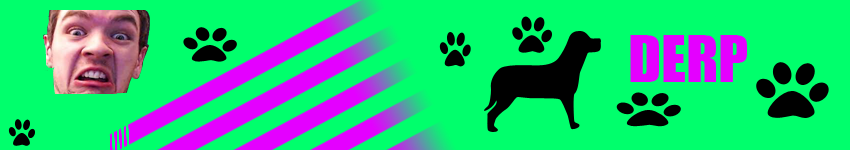
<style>
.page{position:relative;width:850px;height:150px;background:#00ff6c}
.page>*{position:absolute;margin:0}
.t1{font:60px "Impact";color:#e400ff}
</style>
<div class="page">
<p class="t1" style="left:630px;top:35px;width:117px;height:47px">DERP</p>
</div>
